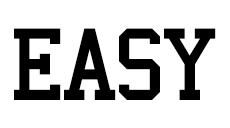
<style>
.page{position:relative;width:230px;height:128px;background:#ffffff}
.page>*{position:absolute;margin:0}
.t1{font:104.7px "College";letter-spacing:-0.06em;color:#000000}
</style>
<div class="page">
<p class="t1" style="left:14px;top:28px;width:202px;height:72px">EASY</p>
</div>
